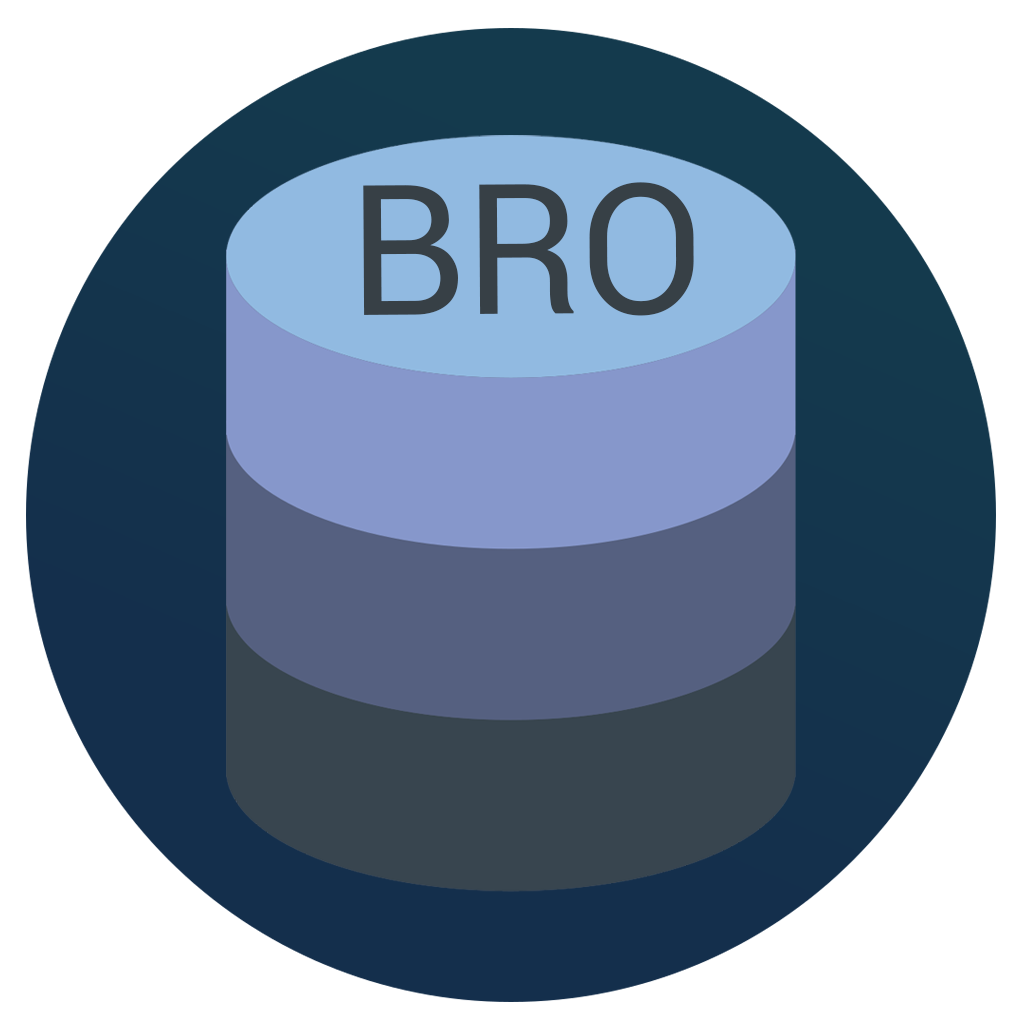
<style>
.page{position:relative;width:1024px;height:1024px;background:#ffffff}
.page>*{position:absolute;margin:0}
.t1{font:182px "Roboto-Regular";color:#374046}
</style>
<div class="page">
<p class="t1" style="left:363px;top:182px;width:331px;height:134px">BRO</p>
</div>
